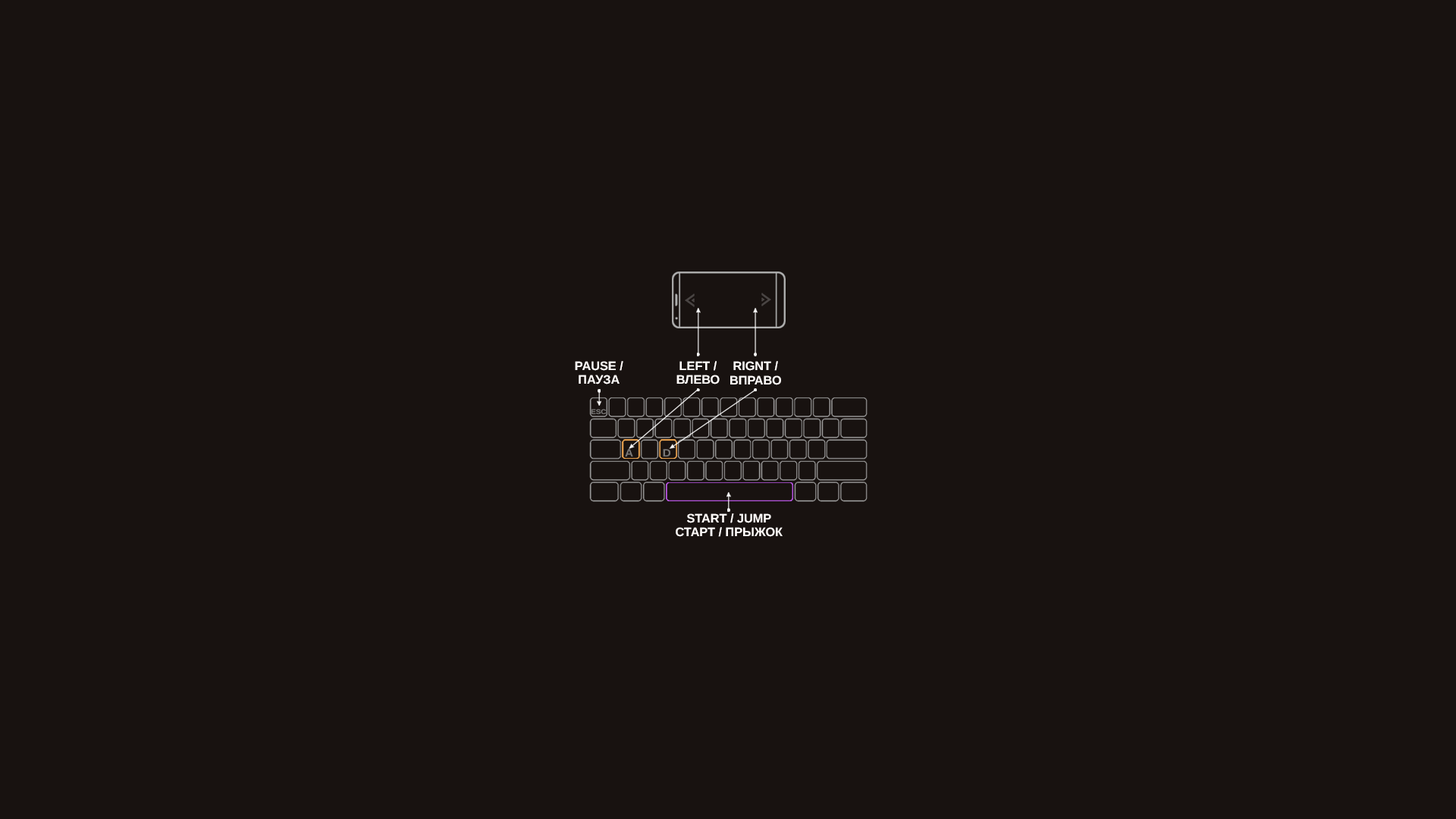
<style>
.page{position:relative;width:1456px;height:819px;background:#181210}
.page>*{position:absolute;margin:0}
.t1{font:12.3px/14.1px "LiberationSans-Bold";color:#fffbf9;text-transform:uppercase}
.t2{font:6.8px "LiberationSans-Bold";color:#787675;text-transform:uppercase;scale:1.1 1}
.t3{font:10.6px "LiberationSans-Bold";color:#787675;text-transform:uppercase;scale:1.1 1}
</style>
<div class="page">
<p class="t1" style="left:575px;top:361px;width:48px;height:23px;text-align:center">Pause /<br>пауза</p>
<p class="t1" style="left:676px;top:361px;width:44px;height:23px;text-align:center">left /<br>влево</p>
<p class="t1" style="left:730px;top:361px;width:51px;height:24px;text-align:center">rignt /<br>вправо</p>
<p class="t2" style="left:591px;top:409px;width:16px;height:6px">esc</p>
<p class="t3" style="left:625px;top:449px;width:8px;height:8px">a</p>
<p class="t3" style="left:663px;top:449px;width:7px;height:8px">D</p>
<p class="t1" style="left:676px;top:513px;width:107px;height:24px;text-align:center">start / jump<br>старт / прыжок</p>
</div>
